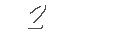
<style>
.page{position:relative;width:128px;height:32px;background:#ffffff}
.page>*{position:absolute;margin:0}
.t1{font:43px "DomDiagonalBT-Regular";letter-spacing:0.075em;color:#ffffff;scale:1.05 1}
</style>
<div class="page">
<p class="t1" style="left:27px;top:2px;width:19px;height:27px">2</p>
</div>
